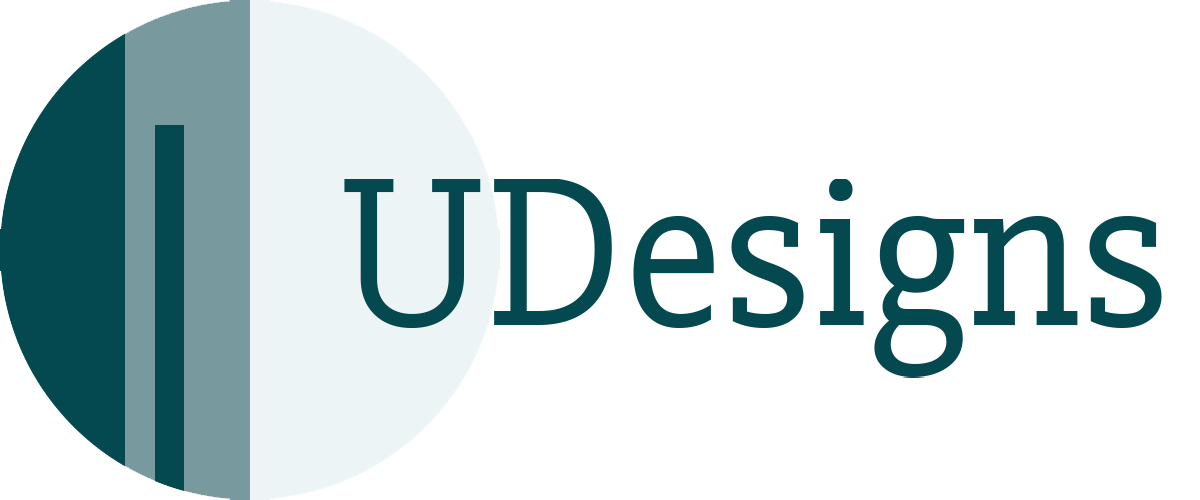
<style>
.page{position:relative;width:1200px;height:500px;background:#ffffff}
.page>*{position:absolute;margin:0}
.t1{font:220px "Slabo27px-Regular";color:#054950}
</style>
<div class="page">
<p class="t1" style="left:344px;top:179px;width:818px;height:199px">UDesigns</p>
</div>
